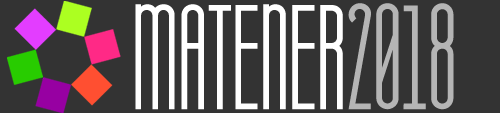
<style>
.page{position:relative;width:500px;height:113px;background:#333333}
.page>*{position:absolute;margin:0}
.t1{font:142.8px "Komoda-Regular";color:#ffffff}
.t2{font:142.8px "Komoda-Regular";color:#b5b5b5}
</style>
<div class="page">
<p class="t1" style="left:135px;top:3px;width:319px;height:107px">maTENER<span class="t2">2018</span></p>
</div>
